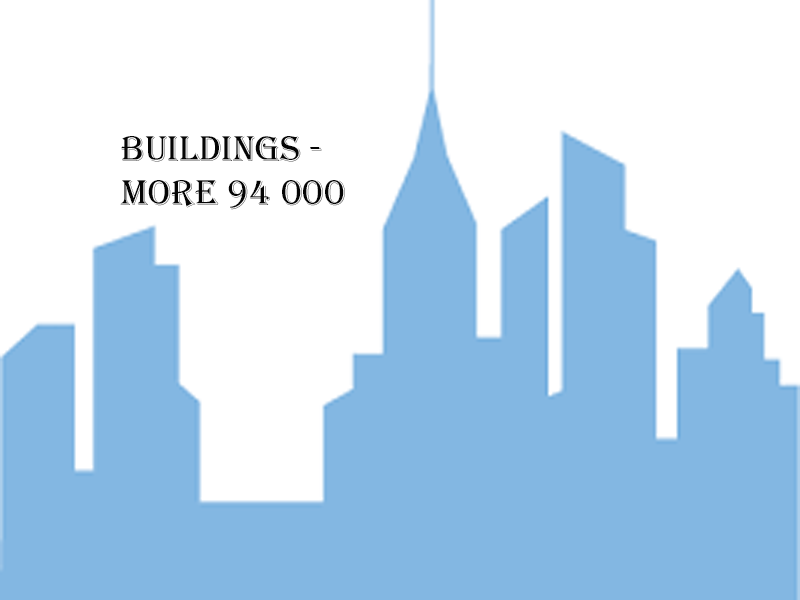
<style>
.page{position:relative;width:800px;height:600px;background:#ffffff}
.page>*{position:absolute;margin:0}
.t1{font:37px "Algerian";color:#050505}
</style>
<div class="page">
<p class="t1" style="left:120px;top:136px;width:225px;height:74px">buildings - <br>More 94 000</p>
</div>
